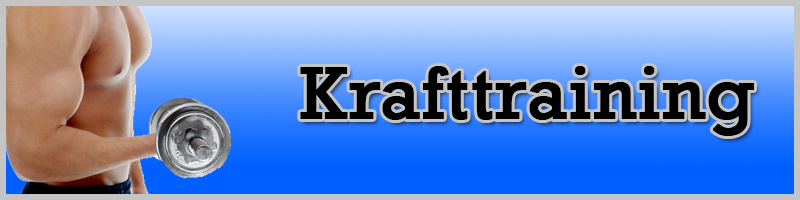
<style>
.page{position:relative;width:800px;height:200px}
.page>*{position:absolute;margin:0}
.t1{font:75px "Rockwell";color:#000000;font-weight:bold}
</style>
<div class="page">
<p class="t1" style="left:300px;top:66px;width:454px;height:70px">Krafttraining</p>
</div>
